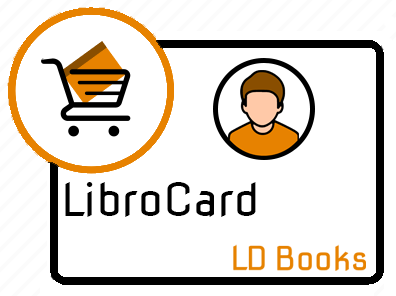
<style>
.page{position:relative;width:396px;height:296px;background:#ffffff}
.page>*{position:absolute;margin:0}
.t1{font:45.3px "NovaFlat";color:#000000}
</style>
<div class="page">
<p class="t1" style="left:65px;top:182px;width:191px;height:35px">LibroCard</p>
</div>
